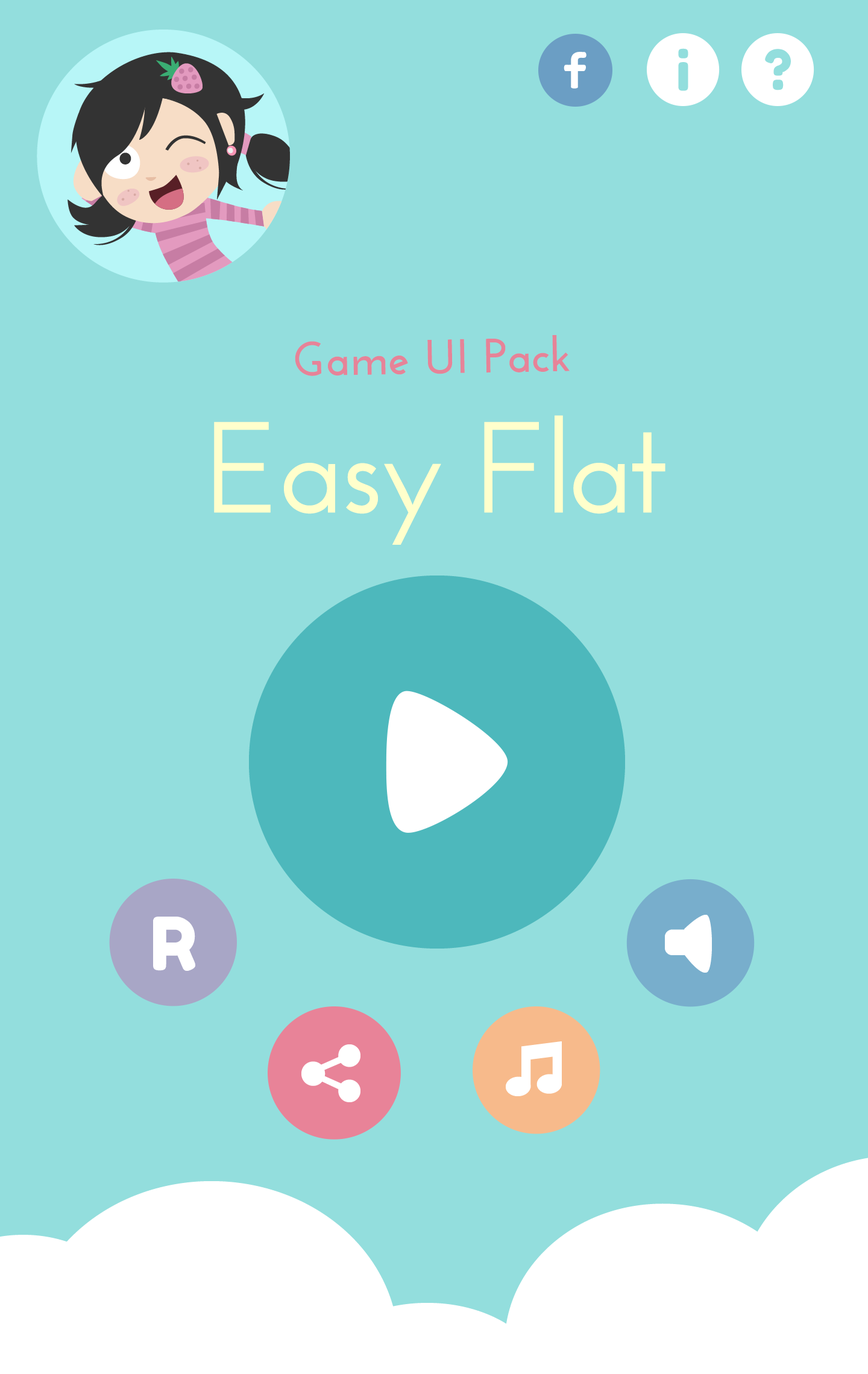
<style>
.page{position:relative;width:868px;height:1374px;background:#93dedd}
.page>*{position:absolute;margin:0}
.t1{font:48.2px "JosefinSans-Bold";color:#e68398}
.t2{font:129.1px "JosefinSans-SemiBold";letter-spacing:-0.03em;color:#ffffcc}
</style>
<div class="page">
<p class="t1" style="left:295px;top:335px;width:275px;height:41px;rotate:-1deg">Game UI Pack</p>
<p class="t2" style="left:214px;top:415px;width:451px;height:130px">Easy Flat</p>
</div>
